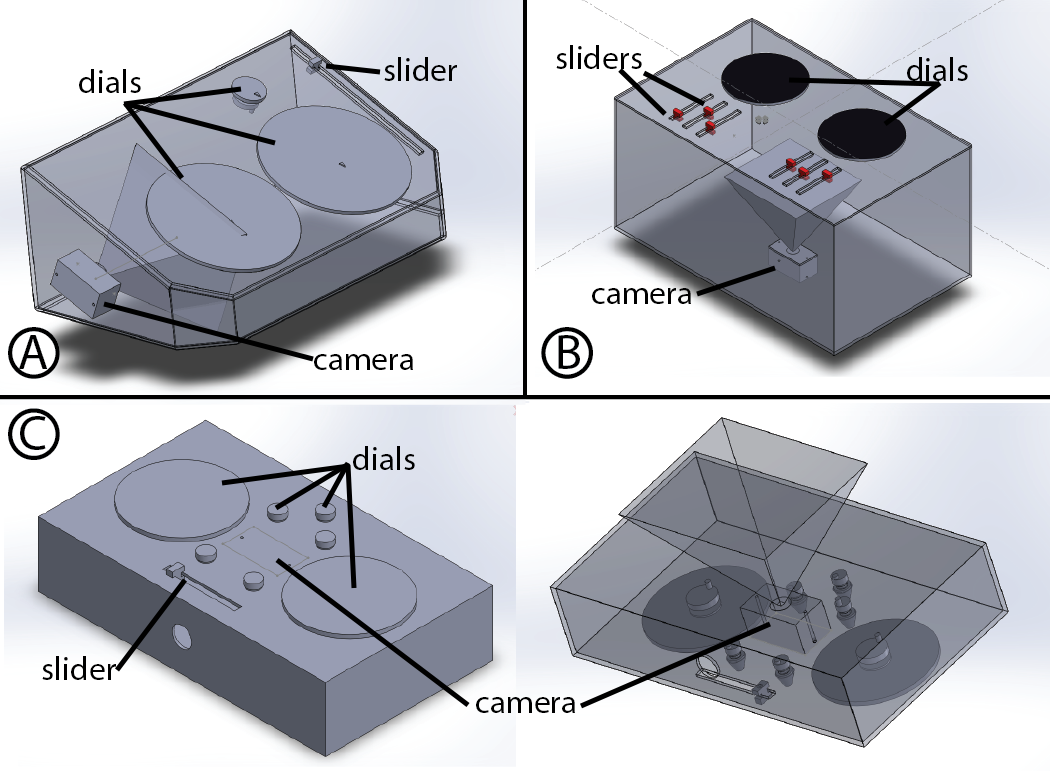
<style>
.page{position:relative;width:1050px;height:771px;background:#ffffff}
.page>*{position:absolute;margin:0}
.t1{font:33.3px "MyriadPro-Regular";color:#000000}
</style>
<div class="page">
<p class="t1" style="left:556px;top:45px;width:86px;height:24px">sliders</p>
<p class="t1" style="left:384px;top:57px;width:73px;height:24px">slider</p>
<p class="t1" style="left:907px;top:57px;width:61px;height:24px">dials</p>
<p class="t1" style="left:79px;top:69px;width:62px;height:24px">dials</p>
<p class="t1" style="left:592px;top:288px;width:99px;height:16px">camera</p>
<p class="t1" style="left:314px;top:354px;width:99px;height:16px">camera</p>
<p class="t1" style="left:353px;top:446px;width:62px;height:24px">dials</p>
<p class="t1" style="left:42px;top:656px;width:74px;height:24px">slider</p>
<p class="t1" style="left:476px;top:697px;width:99px;height:16px">camera</p>
</div>
